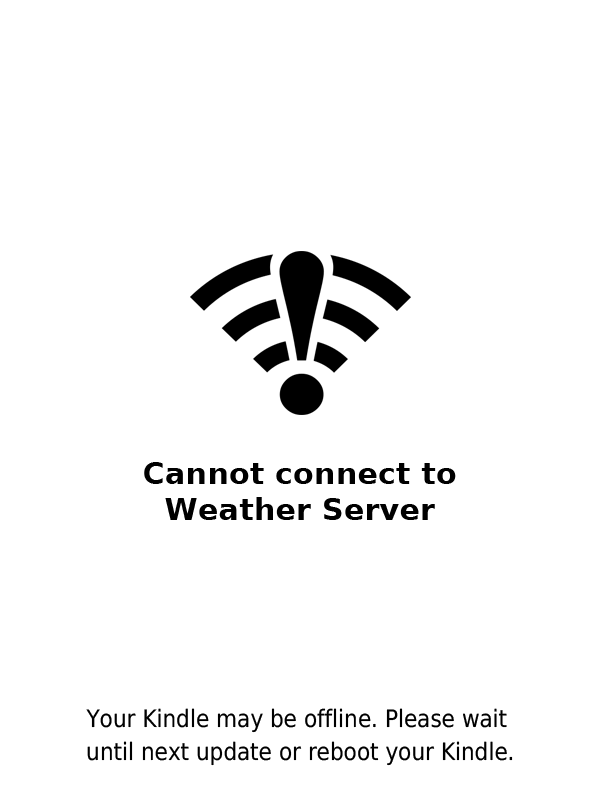
<style>
.page{position:relative;width:600px;height:800px;background:#ffffff}
.page>*{position:absolute;margin:0}
.t1{font:30.5px/36px "DejaVuSans-Bold";color:#000000}
.t2{font:24px "DejaVuSansCondensed";color:#000000}
</style>
<div class="page">
<p class="t1" style="left:144px;top:462px;width:312px;height:58px;text-align:center">Cannot connect to<br>Weather Server</p>
<p class="t2" style="left:86px;top:708px;width:421px;height:25px">Your Kindle may be offline. Please wait</p>
<p class="t2" style="left:87px;top:741px;width:426px;height:25px">until next update or reboot your Kindle.</p>
</div>
